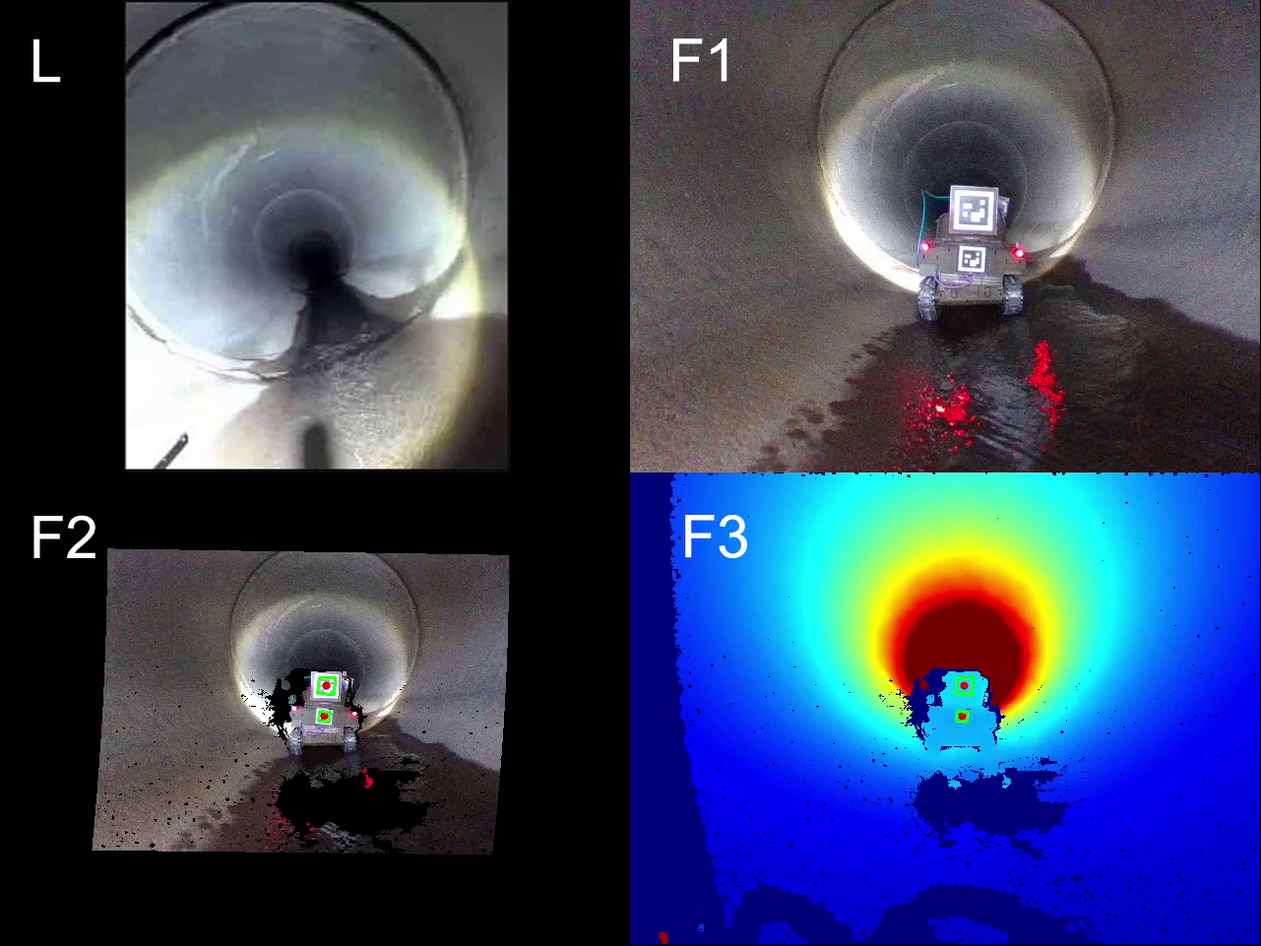
<style>
.page{position:relative;width:1261px;height:946px;background:#000000}
.page>*{position:absolute;margin:0}
.t1{font:59.1px "ArialMT";color:#ffffff}
</style>
<div class="page">
<p class="t1" style="left:33px;top:39px;width:28px;height:44px">L</p>
<p class="t1" style="left:673px;top:38px;width:54px;height:44px">F1</p>
<p class="t1" style="left:33px;top:515px;width:62px;height:43px">F2</p>
<p class="t1" style="left:685px;top:515px;width:62px;height:43px">F3</p>
</div>
